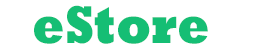
<style>
.page{position:relative;width:263px;height:51px;background:#ffffff}
.page>*{position:absolute;margin:0}
.t1{font:54.2px "Rockwell-ExtraBold";color:#15be74;scale:0.87 1}
</style>
<div class="page">
<p class="t1" style="left:34px;top:5px;width:174px;height:39px">eStore</p>
</div>
